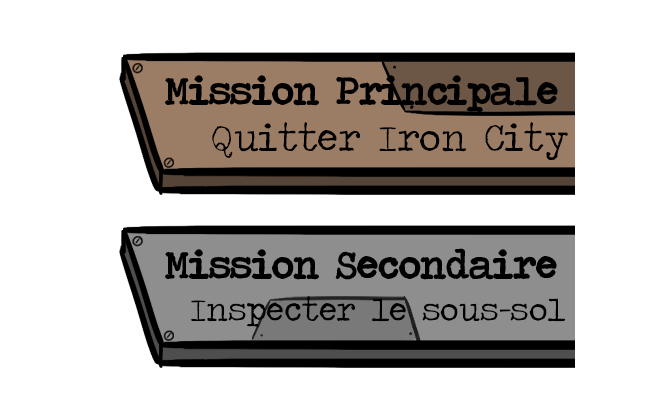
<style>
.page{position:relative;width:650px;height:420px;background:#ffffff}
.page>*{position:absolute;margin:0}
.t1{font:38.9px "TravelingTypewriter";color:#000000}
.t2{font:33.3px "TravelingTypewriter";color:#000000}
</style>
<div class="page">
<p class="t1" style="left:166px;top:76px;width:391px;height:35px">Mission Principale</p>
<p class="t1" style="left:212px;top:122px;width:356px;height:38px">Quitter Iron City</p>
<p class="t1" style="left:166px;top:249px;width:390px;height:30px">Mission Secondaire</p>
<p class="t2" style="left:191px;top:296px;width:375px;height:31px;text-align:right">Inspecter le sous-sol <br>du bar</p>
</div>
